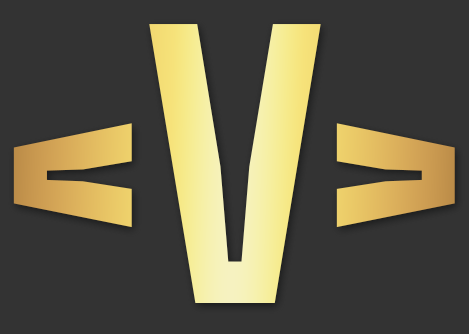
<style>
.page{position:relative;width:469px;height:334px;background:#333333}
.page>*{position:absolute;margin:0}
.t1{font:400px "Agdasima-Bold"}
</style>
<div class="page">
<p class="t1" style="left:13px;top:24px;width:442px;height:279px">&lt;V&gt;</p>
</div>
